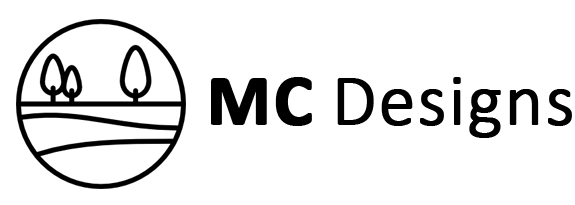
<style>
.page{position:relative;width:575px;height:205px;background:#ffffff}
.page>*{position:absolute;margin:0}
.t1{font:73.3px "Calibri-Bold";letter-spacing:0.01em;color:#000000;font-weight:bold}
.t2{font:73.3px "Calibri-Light";letter-spacing:0.01em;color:#000000;font-weight:bold}
</style>
<div class="page">
<p class="t1" style="left:211px;top:77px;width:101px;height:49px">MC</p>
<p class="t2" style="left:337px;top:77px;width:235px;height:61px">Designs</p>
</div>
